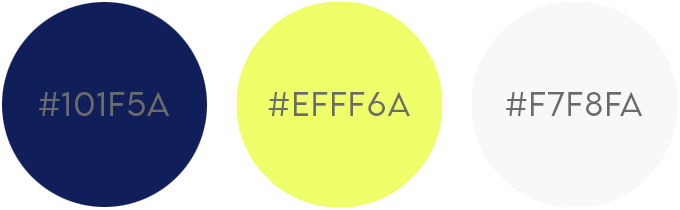
<style>
.page{position:relative;width:680px;height:210px;background:#ffffff}
.page>*{position:absolute;margin:0}
.t1{font:30px "LEMONMILK-Light";letter-spacing:0.05em;color:#6b6b6b}
</style>
<div class="page">
<p class="t1" style="left:39px;top:92px;width:131px;height:24px">#101f5a</p>
<p class="t1" style="left:268px;top:92px;width:142px;height:24px">#efff6a</p>
<p class="t1" style="left:506px;top:92px;width:137px;height:24px">#f7f8fa</p>
</div>
